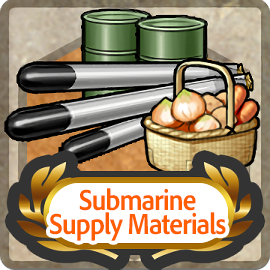
<style>
.page{position:relative;width:270px;height:270px}
.page>*{position:absolute;margin:0}
.t1{font:30px/24px "AdobeClean-Bold";letter-spacing:-0.04em;color:#ff5d00;scale:0.9 1}
</style>
<div class="page">
<p class="t1" style="left:50px;top:188px;width:176px;height:53px;text-align:center">Submarine<br>Supply Materials</p>
</div>
